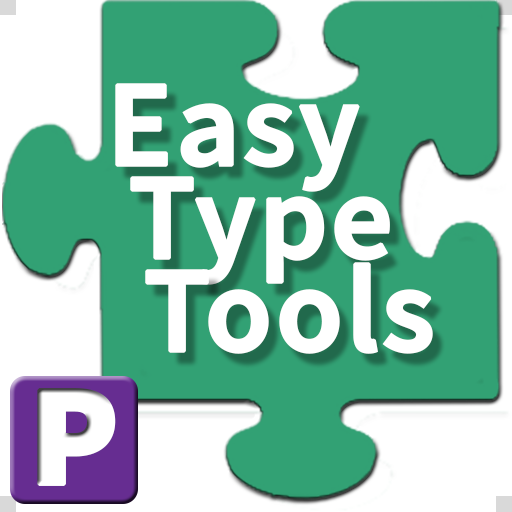
<style>
.page{position:relative;width:512px;height:512px;background:#32a174}
.page>*{position:absolute;margin:0}
.t1{font:122px "SourceSansPro-Semibold";color:#ffffff;font-weight:bold}
.t2{font:144px "SourceSansPro-Black";color:#ffffff;text-transform:uppercase;font-weight:bold}
</style>
<div class="page">
<p class="t1" style="left:115px;top:83px;width:245px;height:109px">Easy</p>
<p class="t1" style="left:130px;top:176px;width:260px;height:109px">Type</p>
<p class="t1" style="left:145px;top:262px;width:288px;height:92px">Tools</p>
<p class="t2" style="left:37px;top:388px;width:79px;height:98px">P</p>
</div>
